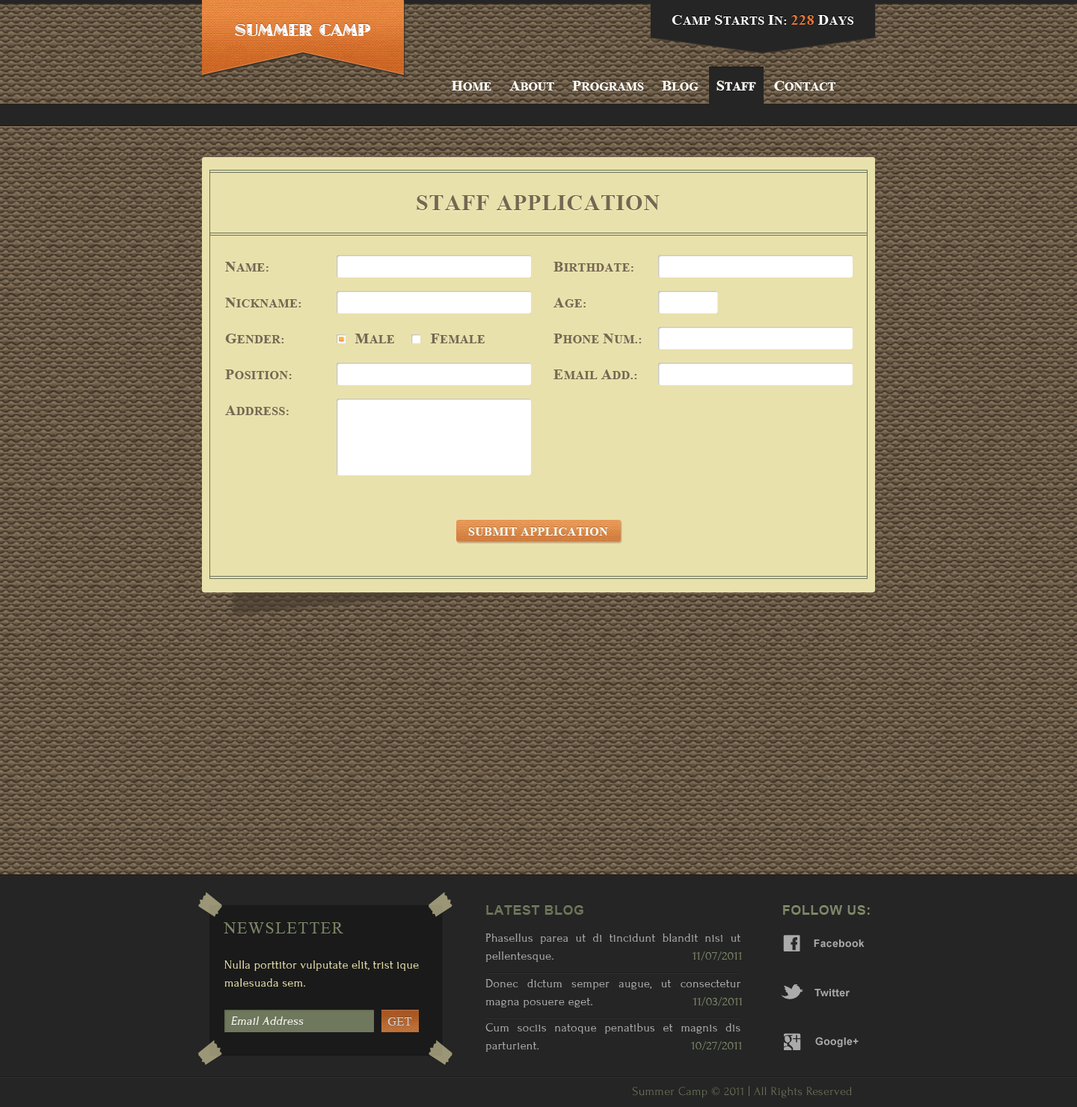
<style>
.page{position:relative;width:1077px;height:1107px}
.page>*{position:absolute;margin:0}
.t1{font:12px "TimesNewRomanPS-BoldMT";letter-spacing:0.028em;color:#ffffff;text-transform:uppercase}
.t2{font:15px "TimesNewRomanPS-BoldMT";letter-spacing:0.028em;color:#ffffff;text-transform:uppercase}
.t3{font:15px "TimesNewRomanPS-BoldMT";letter-spacing:0.028em;color:#e17538;text-transform:uppercase}
.t4{font:18px "JazzLetPlain";color:#ffffff}
.t5{font:12px "TimesNewRomanPS-BoldMT";color:#e9e1ac}
.t6{font:15px "TimesNewRomanPS-BoldMT";color:#e9e1ac}
.t7{font:15px "TimesNewRomanPS-BoldMT";color:#ffffff}
.t8{font:12px "TimesNewRomanPS-BoldMT";color:#ffffff}
.t9{font:22.4px "TimesNewRomanPS-BoldMT";letter-spacing:0.028em;color:#756752}
.t10{font:12px "TimesNewRomanPS-BoldMT";letter-spacing:0.028em;color:#756752;text-transform:uppercase}
.t11{font:15px "TimesNewRomanPS-BoldMT";letter-spacing:0.028em;color:#756752;text-transform:uppercase}
.t12{font:13.5px "Arial-BoldMT";letter-spacing:0.028em;color:#6b7459}
.t13{font:13.5px "Arial-BoldMT";letter-spacing:0.028em;color:#7c8668}
.t14{font:16.5px "TimesNewRomanPSMT";letter-spacing:0.075em;color:#7c8668}
.t15{font:12px/18px "Forum";letter-spacing:0.028em;color:#aaaaaa}
.t16{font:12px/18px "Forum";letter-spacing:0.028em;color:#7c8668}
.t17{font:12px/18px "Forum";letter-spacing:0.028em;color:#e9e1ac}
.t18{font:12px "Forum";letter-spacing:0.028em;color:#ffffff;font-style:italic}
.t19{font:12px "Times-Roman";letter-spacing:0.028em;color:#d1d1d1;text-transform:uppercase}
.t20{font:12px "Forum";letter-spacing:0.028em;color:#6b7459}
</style>
<div class="page">
<p class="t1" style="left:672px;top:15px;width:182px;height:10px"><span class="t2">C</span>amp <span class="t2">S</span>tarts <span class="t2">I</span>n: <span class="t3">228 </span><span class="t2">D</span>ays</p>
<p class="t4" style="left:235px;top:24px;width:136px;height:12px">SUMMER CAMP</p>
<p class="t5" style="left:451px;top:81px;width:385px;height:10px"><span class="t6">H</span>OME      <span class="t6">A</span>BOUT      <span class="t6">P</span>ROGRAMS      <span class="t6">B</span>LOG      <span class="t7">S</span><span class="t8">TAFF      </span><span class="t6">C</span>ONTACT</p>
<p class="t8" style="left:451px;top:81px;width:385px;height:10px"><span class="t7">H</span>OME      <span class="t7">A</span>BOUT      <span class="t7">P</span>ROGRAMS      <span class="t7">B</span>LOG      <span class="t7">S</span>TAFF      <span class="t7">C</span>ONTACT</p>
<p class="t9" style="left:417px;top:195px;width:243px;height:15px">STAFF APPLICATION</p>
<p class="t10" style="left:225px;top:262px;width:44px;height:10px"><span class="t11">N</span>ame:</p>
<p class="t10" style="left:554px;top:262px;width:80px;height:10px"><span class="t11">B</span>irthdate:</p>
<p class="t10" style="left:225px;top:298px;width:76px;height:9px"><span class="t11">N</span>ickname:</p>
<p class="t10" style="left:554px;top:298px;width:32px;height:9px"><span class="t11">A</span>ge:</p>
<p class="t10" style="left:225px;top:334px;width:59px;height:9px"><span class="t11">G</span>ender:</p>
<p class="t10" style="left:355px;top:334px;width:39px;height:9px"><span class="t11">M</span>ale</p>
<p class="t10" style="left:430px;top:334px;width:55px;height:9px"><span class="t11">F</span>emale</p>
<p class="t10" style="left:554px;top:334px;width:88px;height:9px"><span class="t11">P</span>hone <span class="t11">N</span>um.:</p>
<p class="t10" style="left:225px;top:370px;width:67px;height:9px"><span class="t11">P</span>osition:</p>
<p class="t10" style="left:554px;top:370px;width:83px;height:9px"><span class="t11">E</span>mail <span class="t11">A</span>dd.:</p>
<p class="t10" style="left:225px;top:405px;width:64px;height:10px"><span class="t11">A</span>ddress:</p>
<p class="t1" style="left:468px;top:527px;width:140px;height:9px">submit application</p>
<p class="t12" style="left:486px;top:905px;width:97px;height:10px">LATEST BLOG</p>
<p class="t13" style="left:783px;top:905px;width:87px;height:10px">FOLLOW US:</p>
<p class="t14" style="left:224px;top:922px;width:119px;height:12px">NEWSLETTER</p>
<p class="t15" style="left:485px;top:934px;width:257px;height:28px;text-align:justify">Phasellus parea ut di tincidunt blandit nisi ut pellentesque.                          <span class="t16">11/07/2011</span></p>
<p class="t17" style="left:224px;top:960px;width:195px;height:27px;text-align:justify">Nulla porttitor vulputate elit, trist ique malesuada sem.</p>
<p class="t15" style="left:485px;top:979px;width:257px;height:29px;text-align:justify">Donec dictum semper augue, ut consectetur magna posuere eget.                             <span class="t16">11/03/2011</span></p>
<p class="t18" style="left:231px;top:1017px;width:73px;height:8px">Email Address</p>
<p class="t19" style="left:387px;top:1017px;width:25px;height:9px">get</p>
<p class="t15" style="left:485px;top:1023px;width:257px;height:29px;text-align:justify">Cum sociis natoque penatibus et magnis dis parturient.                                            <span class="t16">10/27/2011</span></p>
<p class="t20" style="left:633px;top:1086px;width:219px;height:12px">Summer Camp © 2011 | All Rights Reserved</p>
</div>
